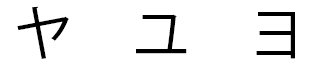
<style>
.page{position:relative;width:320px;height:64px;background:#ffffff}
.page>*{position:absolute;margin:0}
.t1{font:60px "KozGoPr6N-Regular";color:#000000}
</style>
<div class="page">
<p class="t1" style="left:17px;top:6px;width:278px;height:53px">ヤ　ユ　ヨ</p>
</div>
